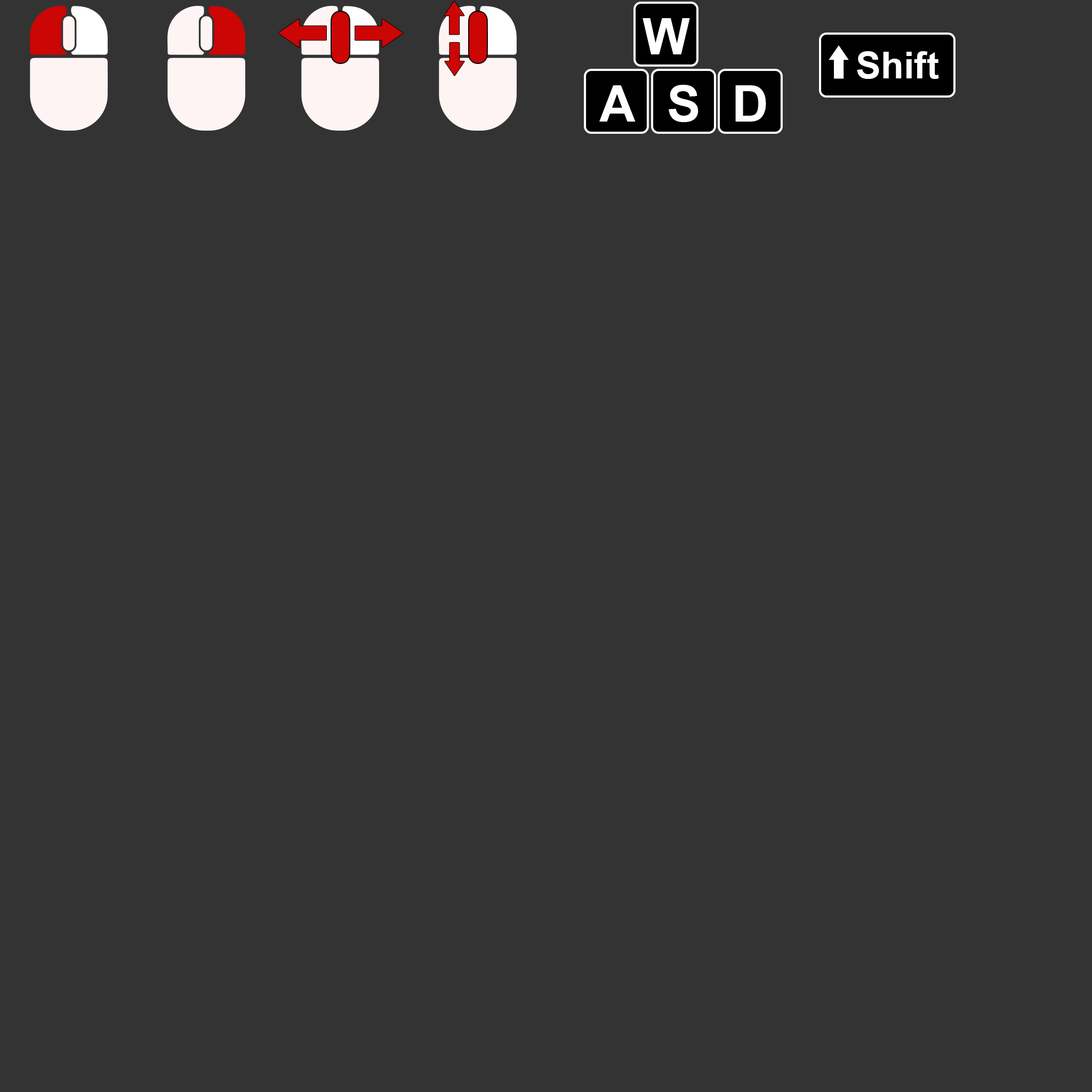
<style>
.page{position:relative;width:1092px;height:1092px;background:#333333}
.page>*{position:absolute;margin:0}
.t1{font:50.1px "Arial-BoldMT";color:#ffffff}
.t2{font:37.3px "Arial-BoldMT";color:#ffffff}
</style>
<div class="page">
<p class="t1" style="left:643px;top:18px;width:47px;height:36px">W</p>
<p class="t2" style="left:857px;top:51px;width:82px;height:28px">Shift</p>
<p class="t1" style="left:599px;top:85px;width:37px;height:37px">A</p>
<p class="t1" style="left:669px;top:85px;width:29px;height:37px">S</p>
<p class="t1" style="left:735px;top:85px;width:31px;height:37px">D</p>
</div>
